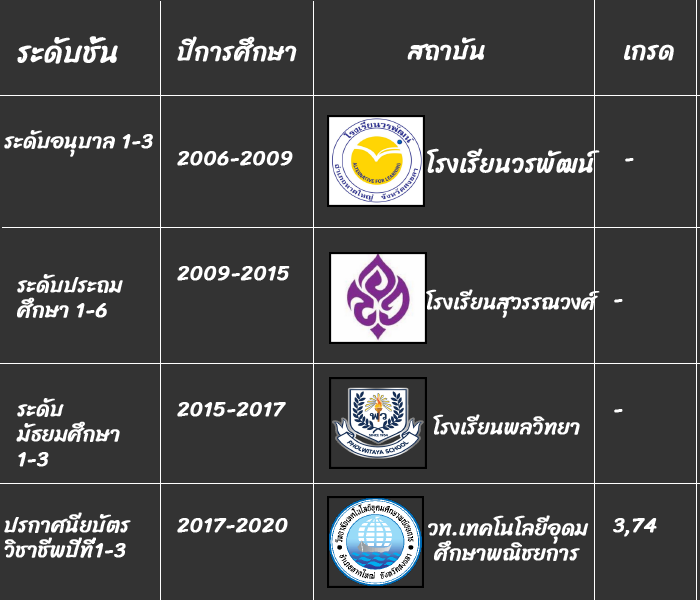
<style>
.page{position:relative;width:700px;height:600px;background:#333333}
.page>*{position:absolute;margin:0}
.t1{font:29.2px "Sriracha-Regular";color:#ffffff;font-weight:bold}
.t2{font:25px "Sriracha-Regular";color:#ffffff;font-weight:bold}
.t3{font:20.8px "Sriracha-Regular";color:#ffffff;font-weight:bold}
</style>
<div class="page">
<p class="t1" style="left:17px;top:36px;width:101px;height:28px">ระดับชั้น</p>
<p class="t2" style="left:177px;top:36px;width:120px;height:26px">ปีการศึกษา</p>
<p class="t2" style="left:407px;top:37px;width:78px;height:24px">สถาบัน</p>
<p class="t2" style="left:624px;top:44px;width:50px;height:17px">เกรด</p>
<p class="t3" style="left:4px;top:130px;width:149px;height:27px">ระดับอนุบาล 1-3</p>
<p class="t2" style="left:427px;top:148px;width:173px;height:25px">โรงเรียนวรพัฒน์</p>
<p class="t3" style="left:177px;top:151px;width:116px;height:15px">2006-2009</p>
<p class="t3" style="left:625px;top:158px;width:9px;height:4px">-</p>
<p class="t3" style="left:177px;top:266px;width:113px;height:15px">2009-2015</p>
<p class="t3" style="left:17px;top:274px;width:106px;height:44px">ระดับประถมศึกษา 1-6</p>
<p class="t3" style="left:426px;top:289px;width:174px;height:29px">โรงเรียนสุวรรณวงศ์</p>
<p class="t3" style="left:614px;top:299px;width:9px;height:4px">-</p>
<p class="t3" style="left:16px;top:398px;width:104px;height:69px">ระดับมัธยมศึกษา 1-3</p>
<p class="t3" style="left:177px;top:402px;width:109px;height:15px">2015-2017</p>
<p class="t3" style="left:433px;top:414px;width:147px;height:21px">โรงเรียนพลวิทยา</p>
<p class="t3" style="left:614px;top:409px;width:9px;height:4px">-</p>
<p class="t3" style="left:4px;top:512px;width:127px;height:46px">ปรกาศนียบัตรวิชาชีพปีที่1-3</p>
<p class="t3" style="left:177px;top:518px;width:111px;height:15px">2017-2020</p>
<p class="t3" style="left:428px;top:515px;width:161px;height:46px">วท.เทคโนโลยีอุดม<br>          ศึกษาพณิชยการ</p>
<p class="t3" style="left:613px;top:518px;width:44px;height:19px">3,74</p>
</div>
